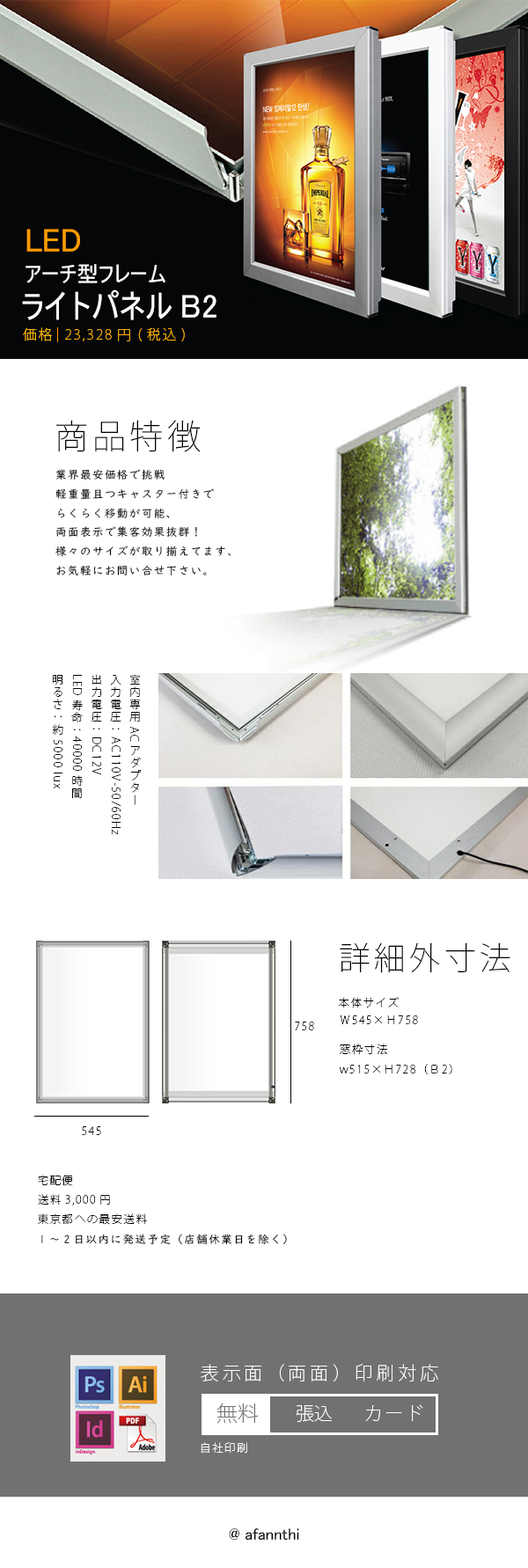
<style>
.page{position:relative;width:528px;height:1568px;background:#ffffff}
.page>*{position:absolute;margin:0}
.t1{font:33px "MS-UIGothic";color:#ff9c00}
.t2{font:10.6px "MS-UIGothic";color:#ffffff}
.t3{font:33px "MS-UIGothic";color:#ffffff}
.t4{font:13.9px "KozGoPro-ExtraLight";letter-spacing:0.117em;color:#ffb502}
.t5{font:33.6px "KozGoPro-ExtraLight";letter-spacing:0.117em;color:#000000}
.t6{font:11px "UDDigiKyokashoN-R";letter-spacing:0.117em;color:#000000}
.t7{font:11px "KozGoPro-ExtraLight";letter-spacing:0.117em;color:#000000}
.t8{font:31.7px "KozGoPro-ExtraLight";letter-spacing:0.117em;color:#010101}
.t9{font:18.3px "KozGoPro-ExtraLight";letter-spacing:0.2em;color:#ffffff}
.t10{font:21.2px "KozGoPro-ExtraLight";color:#717171}
.t11{font:18.3px "KozGoPro-ExtraLight";color:#ffffff}
.t12{font:18.3px "KozGoPro-ExtraLight";letter-spacing:0.117em;color:#ffffff}
.t13{font:11px "KozGoPro-ExtraLight";letter-spacing:0.117em;color:#ffffff}
.t14{font:16.5px "MS-UIGothic";color:#000000}
</style>
<div class="page">
<p class="t1" style="left:26px;top:229px;width:54px;height:23px">LED</p>
<p class="t2" style="left:26px;top:264px;width:139px;height:19px">アーチ型フレーム</p>
<p class="t3" style="left:22px;top:289px;width:194px;height:31px">ライトパネルB2</p>
<p class="t4" style="left:23px;top:327px;width:162px;height:14px">価格 23,328円 (税込)</p>
<p class="t5" style="left:56px;top:420px;width:145px;height:32px">商品特徴</p>
<p class="t6" style="left:55px;top:469px;width:176px;height:107px">業界最安価格で挑戦<br>軽重量且つキャスター付きで<br>らくらく移動が可能、<br>両面表示で集客効果抜群!<br>様々のサイズが取り揃えてます、<br>お気軽にお問い合せ下さい。</p>
<p class="t7" style="left:52px;top:674px;width:90px;height:161px">室内専用ACアダプター<br>入力電圧： AC110V-50/60Hz<br>出力電圧： DC12V<br>LED寿命：40000時間<br>明るさ： 約5000 lux</p>
<p class="t8" style="left:340px;top:942px;width:170px;height:31px">詳細外寸法</p>
<p class="t7" style="left:339px;top:997px;width:60px;height:11px">本体サイズ</p>
<p class="t7" style="left:295px;top:1022px;width:19px;height:8px">758</p>
<p class="t7" style="left:341px;top:1015px;width:77px;height:9px">Ｗ545×Ｈ758</p>
<p class="t7" style="left:340px;top:1044px;width:48px;height:11px">窓枠寸法</p>
<p class="t7" style="left:340px;top:1064px;width:112px;height:10px">w515×Ｈ728（Ｂ2）</p>
<p class="t7" style="left:82px;top:1126px;width:19px;height:9px">545</p>
<p class="t7" style="left:38px;top:1175px;width:109px;height:50px">宅配便<br>送料3,000円 <br>東京都への最安送料</p>
<p class="t6" style="left:41px;top:1234px;width:246px;height:11px">1～2日以内に発送予定（店舗休業日を除く）</p>
<p class="t9" style="left:201px;top:1364px;width:237px;height:17px">表示面（両面）印刷対応</p>
<p class="t10" style="left:216px;top:1403px;width:43px;height:21px">無料</p>
<p class="t11" style="left:297px;top:1405px;width:35px;height:17px">張込</p>
<p class="t12" style="left:365px;top:1404px;width:58px;height:18px">カード</p>
<p class="t13" style="left:201px;top:1442px;width:46px;height:12px">自社印刷</p>
<p class="t14" style="left:229px;top:1528px;width:70px;height:13px">@ afannthi</p>
</div>
